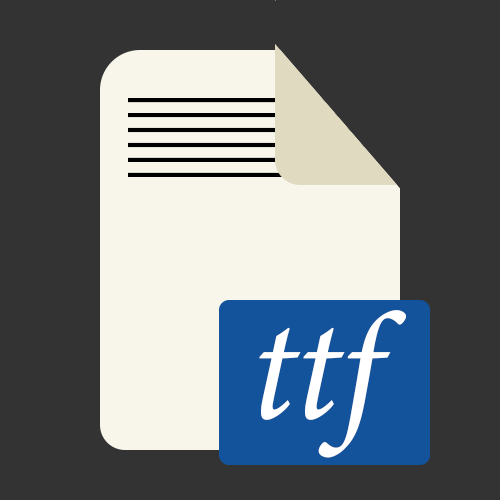
<style>
.page{position:relative;width:500px;height:500px;background:#333333}
.page>*{position:absolute;margin:0}
.t1{font:150px "MinionVariableConcept-Italic";color:#ffffff}
</style>
<div class="page">
<p class="t1" style="left:259px;top:310px;width:148px;height:148px">ttf</p>
</div>
